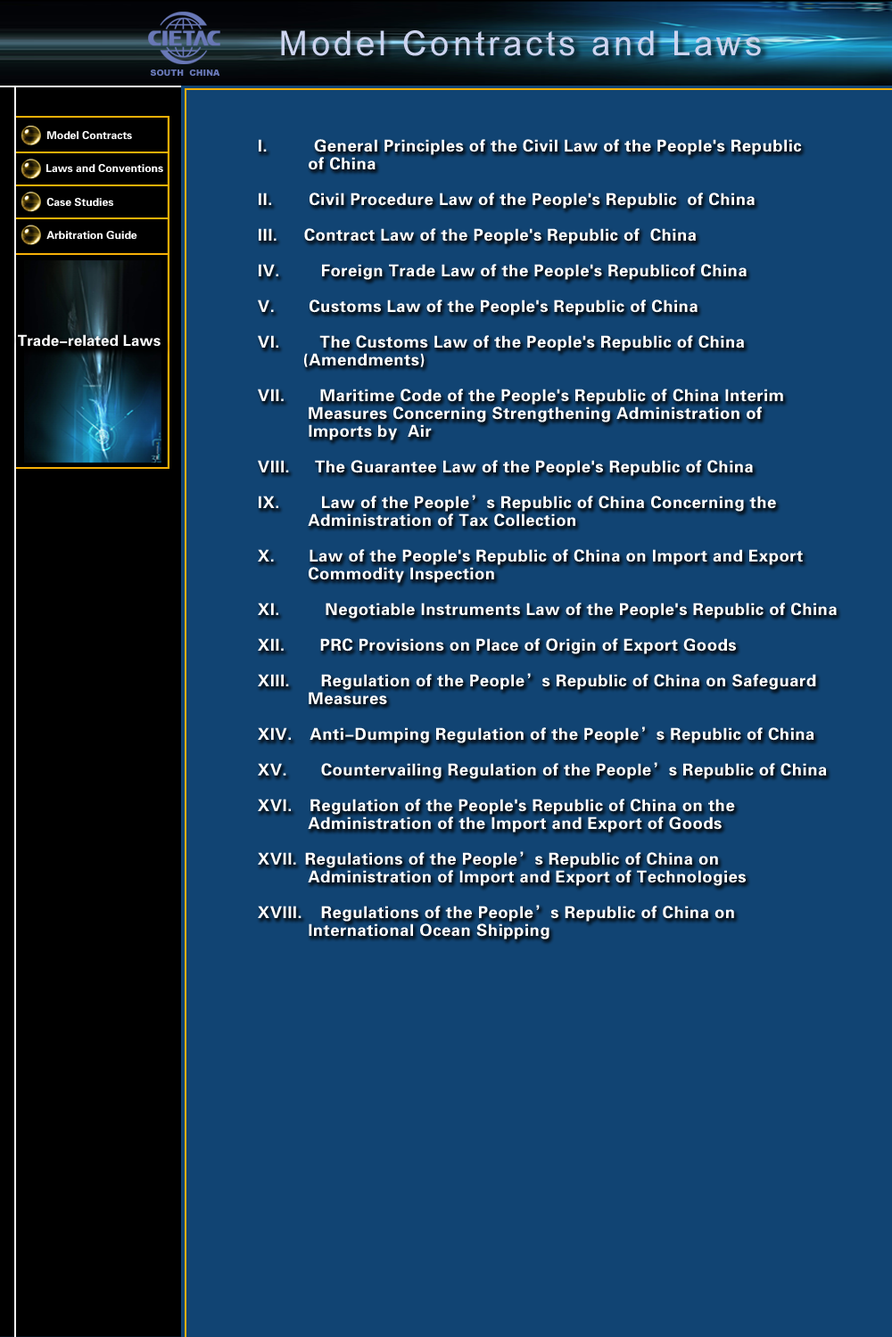
<style>
.page{position:relative;width:892px;height:1337px;background:#114473}
.page>*{position:absolute;margin:0}
.t1{font:10.9px "FZDHTJW--GB1-0";color:#ffffff}
.t2{font:16.6px/17.8px "FZDHTJW--GB1-0";letter-spacing:0.025em;color:#ffffff}
.t3{font:15.2px "FZDHTJW--GB1-0";color:#ffffff}
</style>
<div class="page">
<p class="t1" style="left:47px;top:131px;width:85px;height:8px">Model Contracts</p>
<p class="t2" style="left:258px;top:139px;width:578px;height:801px">I.        General Principles of the Civil Law of the People's Republic <br>          of China<br><br>II.       Civil Procedure Law of the People's Republic  of China<br><br>III.      Contract Law of the People's Republic of  China<br><br>IV.      Foreign Trade Law of the People's Republicof China<br><br>V.       Customs Law of the People's Republic of China<br><br>VI.     The Customs Law of the People's Republic of China<br>         (Amendments)<br><br>VII.     Maritime Code of the People's Republic of China Interim <br>          Measures Concerning Strengthening Administration of <br>          Imports by  Air<br><br>VIII.    The Guarantee Law of the People's Republic of China<br><br>IX.      Law of the People’s Republic of China Concerning the <br>          Administration of Tax Collection<br><br>X.       Law of the People's Republic of China on Import and Export <br>          Commodity Inspection<br><br>XI.      Negotiable Instruments Law of the People's Republic of China<br><br>XII.     PRC Provisions on Place of Origin of Export Goods<br><br>XIII.    Regulation of the People’s Republic of China on Safeguard <br>          Measures<br><br>XIV.   Anti-Dumping Regulation of the People’s Republic of China<br> <br>XV.    Countervailing Regulation of the People’s Republic of China<br><br>XVI.   Regulation of the People's Republic of China on the <br>          Administration of the Import and Export of Goods<br><br>XVII.  Regulations of the People’s Republic of China on <br>          Administration of Import and Export of Technologies<br><br>XVIII. Regulations of the People’s Republic of China on <br>          International Ocean Shipping</p>
<p class="t1" style="left:46px;top:164px;width:117px;height:8px">Laws and Conventions</p>
<p class="t1" style="left:46px;top:198px;width:67px;height:8px">Case Studies</p>
<p class="t1" style="left:46px;top:231px;width:91px;height:8px">Arbitration Guide</p>
<p class="t3" style="left:18px;top:334px;width:142px;height:13px">Trade-related Laws</p>
</div>
